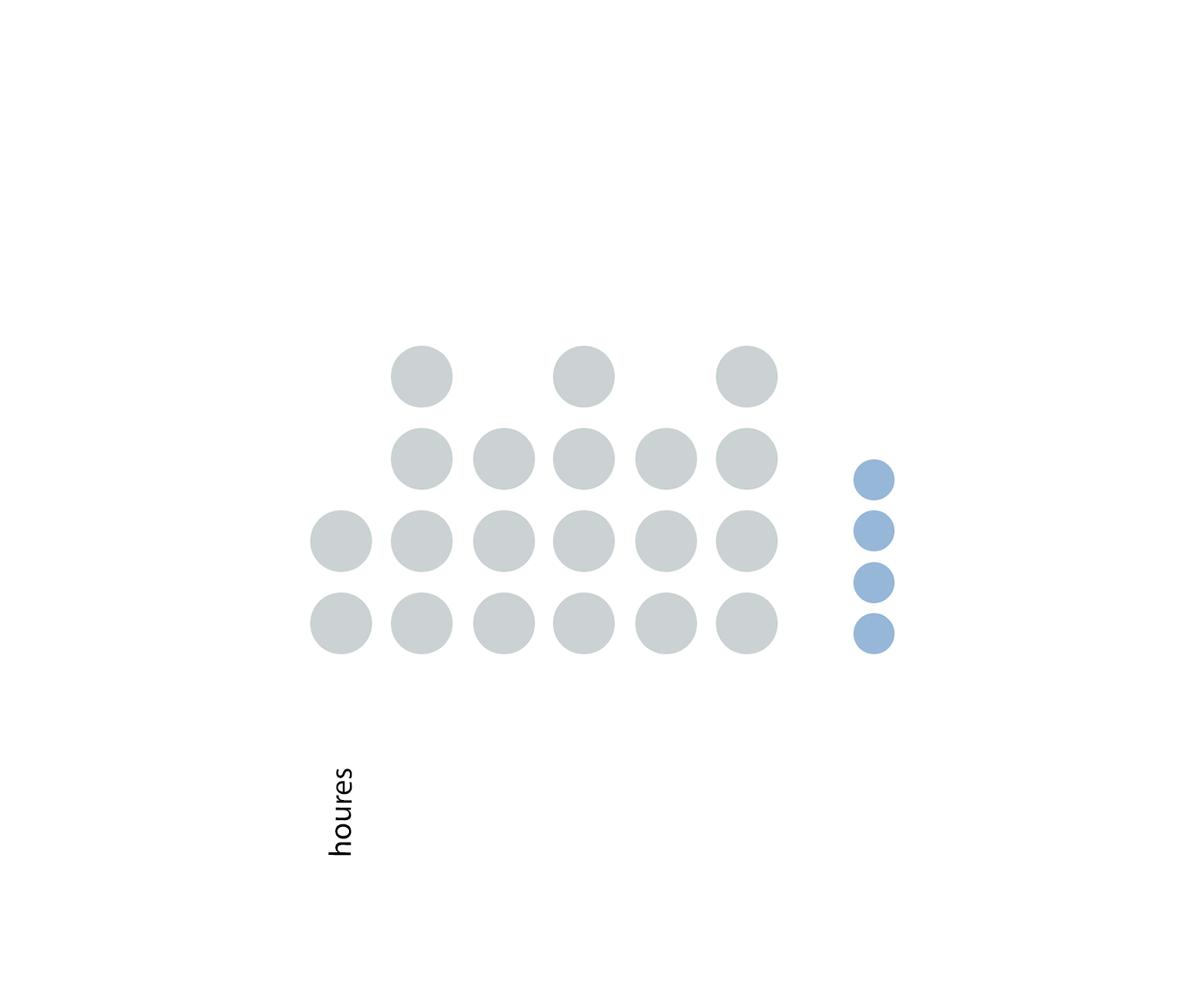
<style>
.page{position:relative;width:1204px;height:991px;background:#ffffff}
.page>*{position:absolute;margin:0}
.t1{font:31.4px "MyriadPro-Regular";color:#000000}
</style>
<div class="page">
<p class="t1" style="left:328px;top:768px;width:24px;height:88px;rotate:-89deg">houres</p>
</div>
